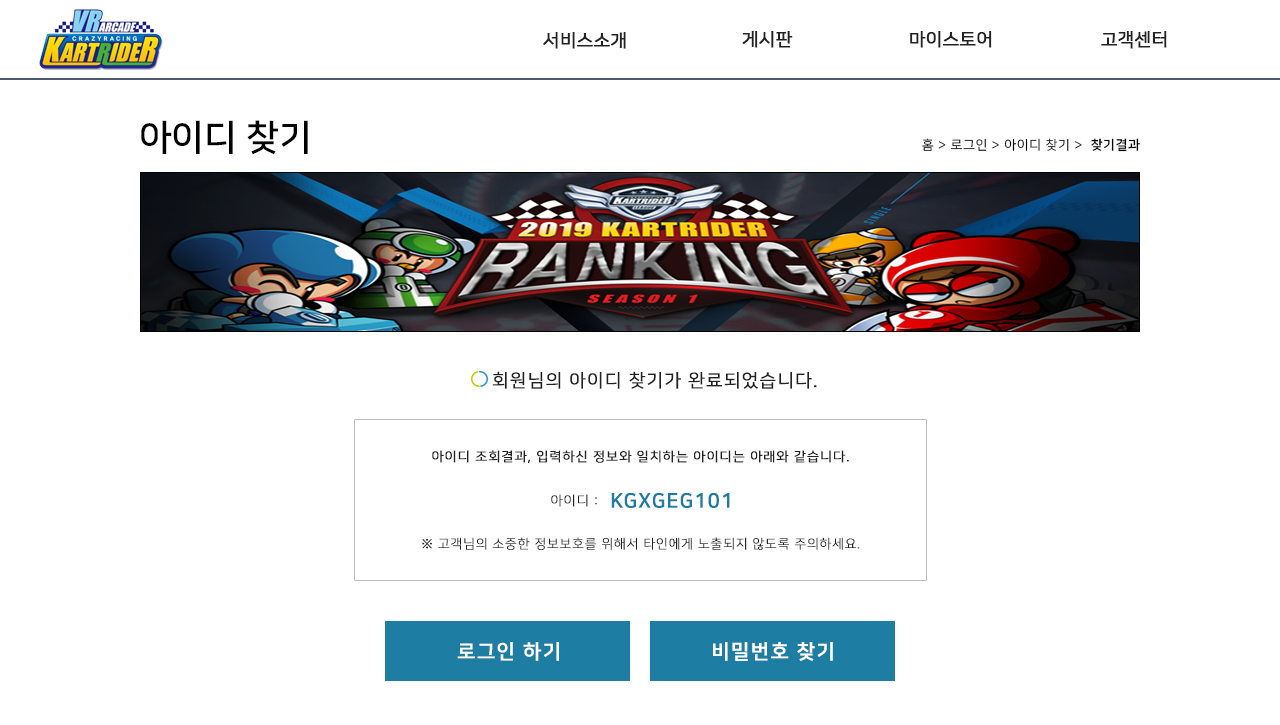
<style>
.page{position:relative;width:1280px;height:725px;background:#ffffff}
.page>*{position:absolute;margin:0}
.t1{font:18px "NanumSquareR";color:#222222;font-weight:bold}
.t2{font:36px "NanumSquareB";color:#000000}
.t3{font:13px "NanumSquareR";letter-spacing:0.05em;color:#000000}
.t4{font:13px "NanumSquareB";letter-spacing:0.05em;color:#000000}
.t5{font:18px "NanumSquareR";letter-spacing:0.05em;color:#222222;text-transform:uppercase;font-weight:bold}
.t6{font:13px "NanumSquareR";letter-spacing:0.05em;color:#222222;text-transform:uppercase;font-weight:bold}
.t7{font:13px "NanumSquareL";letter-spacing:0.05em;color:#222222;text-transform:uppercase;font-weight:bold}
.t8{font:20px "NanumSquareB";letter-spacing:0.05em;color:#1d7ca2;text-transform:uppercase;font-weight:bold}
.t9{font:20px "NanumSquareB";letter-spacing:0.05em;color:#ffffff;font-weight:bold}
</style>
<div class="page">
<p class="t1" style="left:742px;top:30px;width:51px;height:18px">게시판</p>
<p class="t1" style="left:910px;top:30px;width:82px;height:18px">마이스토어</p>
<p class="t1" style="left:1101px;top:30px;width:66px;height:18px">고객센터</p>
<p class="t1" style="left:543px;top:31px;width:83px;height:18px">서비스소개</p>
<p class="t2" style="left:141px;top:120px;width:167px;height:35px">아이디 찾기</p>
<p class="t3" style="left:922px;top:138px;width:218px;height:14px">홈 &gt; 로그인 &gt; 아이디 찾기 &gt;<span class="t4">  찾기결과</span></p>
<p class="t5" style="left:492px;top:371px;width:325px;height:18px">회원님의 아이디 찾기가 완료되었습니다.</p>
<p class="t6" style="left:432px;top:450px;width:417px;height:13px">아이디 조회결과, 입력하신 정보와 일치하는 아이디는 아래와 같습니다.</p>
<p class="t7" style="left:551px;top:494px;width:46px;height:13px">아이디 :</p>
<p class="t8" style="left:611px;top:493px;width:119px;height:15px">kgxgeg101</p>
<p class="t7" style="left:422px;top:537px;width:438px;height:13px">※ 고객님의 소중한 정보보호를 위해서 타인에게 노출되지 않도록 주의하세요.</p>
<p class="t9" style="left:457px;top:642px;width:102px;height:19px">로그인 하기</p>
<p class="t9" style="left:713px;top:642px;width:120px;height:19px">비밀번호 찾기</p>
</div>
